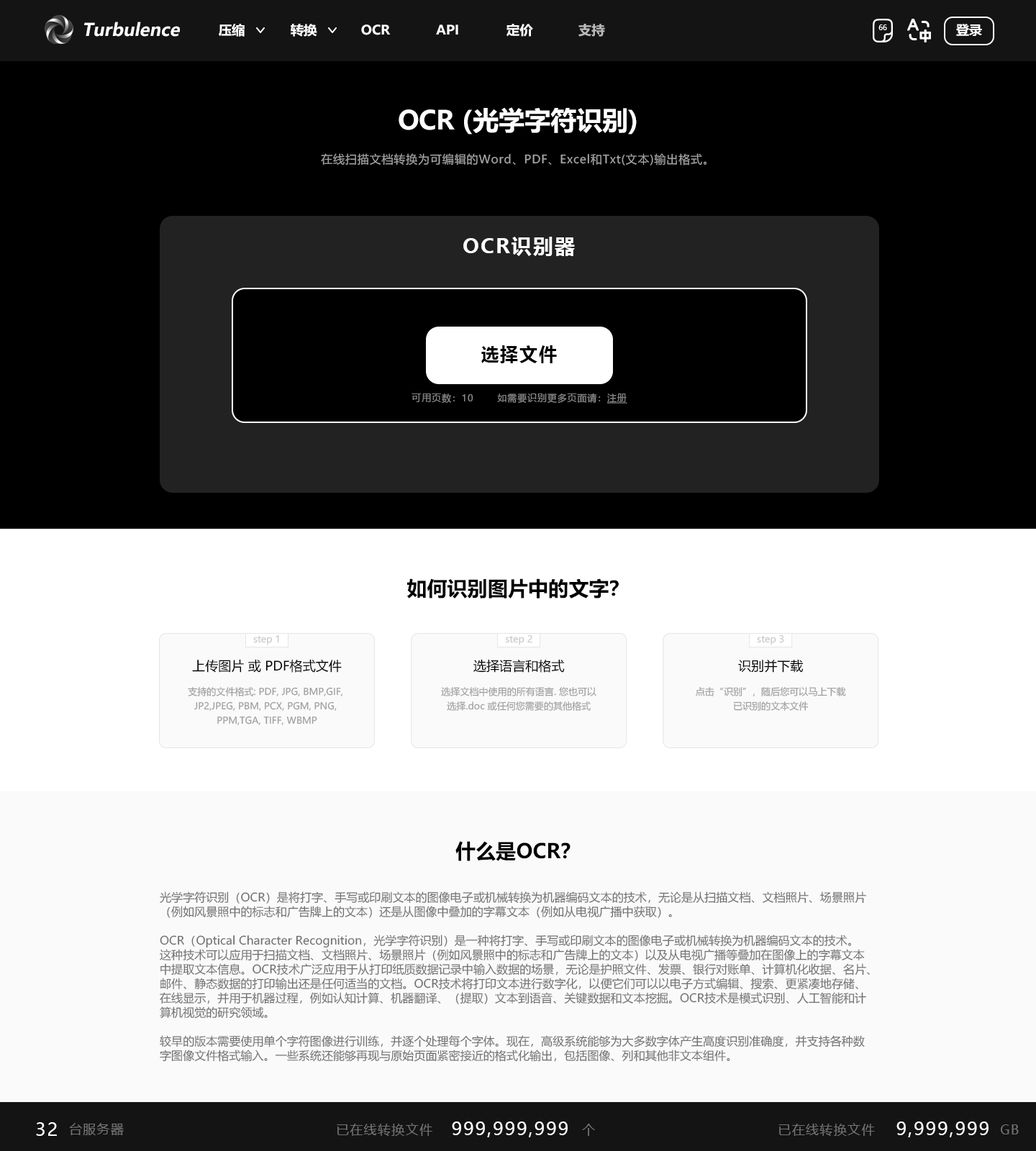
<style>
.page{position:relative;width:1036px;height:1151px;background:#000000}
.page>*{position:absolute;margin:0}
.t1{font:17.3px "MicrosoftYaHei-Bold";color:#fffefe;font-style:italic}
.t2{font:12.9px "MicrosoftYaHei-Bold";color:#ffffff}
.t3{font:12.9px "MicrosoftYaHei-Bold";color:#ffffff;text-transform:uppercase}
.t4{font:12.9px "MicrosoftYaHei-Bold";color:#bababa;text-transform:uppercase}
.t5{font:7.2px "MicrosoftYaHei";color:#ffffff;text-transform:uppercase}
.t6{font:25.9px "MicrosoftYaHei-Bold";color:#ffffff}
.t7{font:11.5px "MicrosoftYaHei";letter-spacing:0.05em;color:#a3a3a3}
.t8{font:20.1px "MicrosoftYaHei-Bold";letter-spacing:0.075em;color:#ffffff;text-transform:uppercase}
.t9{font:18px "MicrosoftYaHei-Bold";letter-spacing:0.075em;color:#000000}
.t10{font:9.4px "MicrosoftYaHei";letter-spacing:0.066em;color:#878787}
.t11{font:9.4px "MicrosoftYaHei";letter-spacing:0.066em;color:#878787;text-decoration:underline}
.t12{font:20.1px "MicrosoftYaHei-Bold";color:#000000}
.t13{font:9.4px "MicrosoftYaHei";color:#cacaca}
.t14{font:12.9px "MicrosoftYaHei";color:#000000}
.t15{font:9.4px/14.4px "MicrosoftYaHei";color:#9f9f9f}
.t16{font:11.5px/14.4px "MicrosoftYaHei";color:#717171}
.t17{font:18px "MicrosoftYaHei";letter-spacing:0.075em;color:#ffffff;text-transform:uppercase}
.t18{font:18px "MicrosoftYaHei";letter-spacing:0.075em;color:#ffffff}
.t19{font:12.9px "MicrosoftYaHei";letter-spacing:0.075em;color:#727272}
</style>
<div class="page">
<p class="t1" style="left:84px;top:22px;width:96px;height:15px">Turbulence</p>
<p class="t2" style="left:219px;top:24px;width:26px;height:13px">压缩</p>
<p class="t3" style="left:291px;top:24px;width:26px;height:13px">转换</p>
<p class="t3" style="left:361px;top:24px;width:30px;height:11px">OCR</p>
<p class="t3" style="left:436px;top:24px;width:22px;height:11px">API</p>
<p class="t3" style="left:506px;top:24px;width:27px;height:13px">定价</p>
<p class="t4" style="left:578px;top:24px;width:27px;height:13px">支持</p>
<p class="t5" style="left:878px;top:24px;width:9px;height:6px">66</p>
<p class="t3" style="left:956px;top:24px;width:26px;height:12px">登录</p>
<p class="t6" style="left:399px;top:107px;width:238px;height:28px">OCR (光学字符识别)</p>
<p class="t7" style="left:321px;top:153px;width:385px;height:12px">在线扫描文档转换为可编辑的Word、PDF、Excel和Txt(文本)输出格式。</p>
<p class="t8" style="left:463px;top:237px;width:112px;height:19px">OCR识别器</p>
<p class="t9" style="left:481px;top:345px;width:76px;height:18px">选择文件</p>
<p class="t10" style="left:412px;top:393px;width:215px;height:11px">可用页数：10       如需要识别更多页面请：<span class="t11">注册</span></p>
<p class="t12" style="left:407px;top:578px;width:212px;height:21px">如何识别图片中的文字？</p>
<p class="t13" style="left:253px;top:635px;width:26px;height:10px">step 1</p>
<p class="t13" style="left:505px;top:635px;width:27px;height:10px">step 2</p>
<p class="t13" style="left:757px;top:635px;width:27px;height:10px">step 3</p>
<p class="t14" style="left:192px;top:659px;width:150px;height:14px">上传图片 或 PDF格式文件</p>
<p class="t14" style="left:473px;top:659px;width:92px;height:14px">选择语言和格式</p>
<p class="t14" style="left:738px;top:659px;width:66px;height:14px">识别并下载</p>
<p class="t15" style="left:188px;top:687px;width:154px;height:38px;text-align:center">支持的文件格式: PDF, JPG, BMP,GIF, <br>JP2,JPEG, PBM, PCX, PGM, PNG, <br>PPM,TGA, TIFF, WBMP</p>
<p class="t15" style="left:441px;top:687px;width:155px;height:24px;text-align:center">选择文档中使用的所有语言. 您也可以<br>选择.doc 或任何您需要的其他格式</p>
<p class="t15" style="left:696px;top:687px;width:150px;height:24px;text-align:center">点击“识别”，随后您可以马上下载<br>已识别的文本文件</p>
<p class="t12" style="left:455px;top:841px;width:115px;height:20px">什么是OCR？</p>
<p class="t16" style="left:160px;top:891px;width:710px;height:171px">光学字符识别（OCR）是将打字、手写或印刷文本的图像电子或机械转换为机器编码文本的技术，无论是从扫描文档、文档照片、场景照片<br>（例如风景照中的标志和广告牌上的文本）还是从图像中叠加的字幕文本（例如从电视广播中获取）。<br><br>OCR（Optical Character Recognition，光学字符识别）是一种将打字、手写或印刷文本的图像电子或机械转换为机器编码文本的技术。<br>这种技术可以应用于扫描文档、文档照片、场景照片（例如风景照中的标志和广告牌上的文本）以及从电视广播等叠加在图像上的字幕文本<br>中提取文本信息。OCR技术广泛应用于从打印纸质数据记录中输入数据的场景，无论是护照文件、发票、银行对账单、计算机化收据、名片、<br>邮件、静态数据的打印输出还是任何适当的文档。OCR技术将打印文本进行数字化，以便它们可以以电子方式编辑、搜索、更紧凑地存储、<br>在线显示，并用于机器过程，例如认知计算、机器翻译、（提取）文本到语音、关键数据和文本挖掘。OCR技术是模式识别、人工智能和计<br>算机视觉的研究领域。<br><br>较早的版本需要使用单个字符图像进行训练，并逐个处理每个字体。现在，高级系统能够为大多数字体产生高度识别准确度，并支持各种数<br>字图像文件格式输入。一些系统还能够再现与原始页面紧密接近的格式化输出，包括图像、列和其他非文本组件。</p>
<p class="t17" style="left:452px;top:1122px;width:116px;height:15px">999,999,999</p>
<p class="t17" style="left:896px;top:1122px;width:92px;height:15px">9,999,999</p>
<p class="t18" style="left:36px;top:1122px;width:21px;height:14px">32</p>
<p class="t19" style="left:69px;top:1123px;width:55px;height:13px">台服务器</p>
</div>
